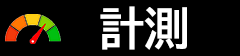
<style>
.page{position:relative;width:240px;height:56px;background:#000000}
.page>*{position:absolute;margin:0}
.t1{font:44.8px "BIZ-UDPGothic-Bold";color:#ffffff}
</style>
<div class="page">
<p class="t1" style="left:100px;top:6px;width:87px;height:44px">計測</p>
</div>
